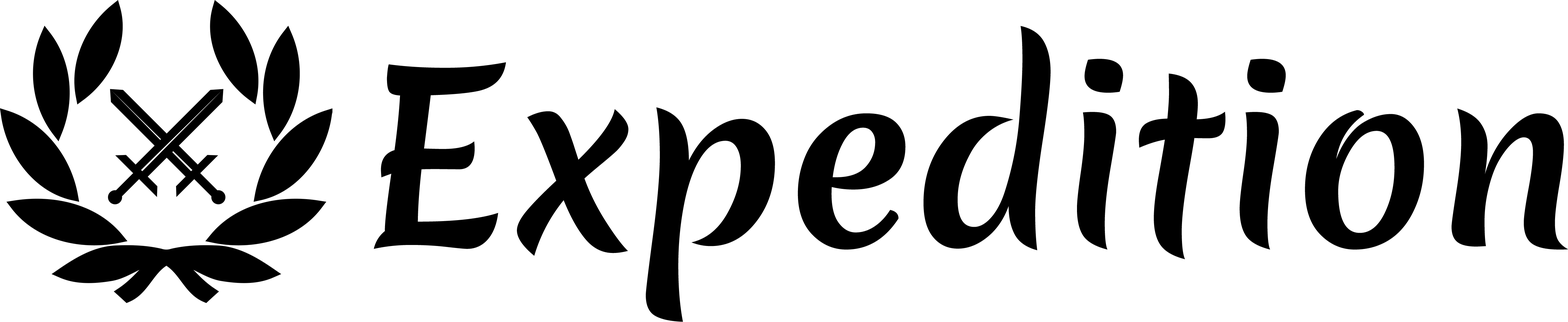
<style>
.page{position:relative;width:1568px;height:322px;background:#ffffff}
.page>*{position:absolute;margin:0}
.t1{font:230.1px "MeriendaOne-Regular";color:#000000}
</style>
<div class="page">
<p class="t1" style="left:374px;top:26px;width:1194px;height:296px">Expedition</p>
</div>
